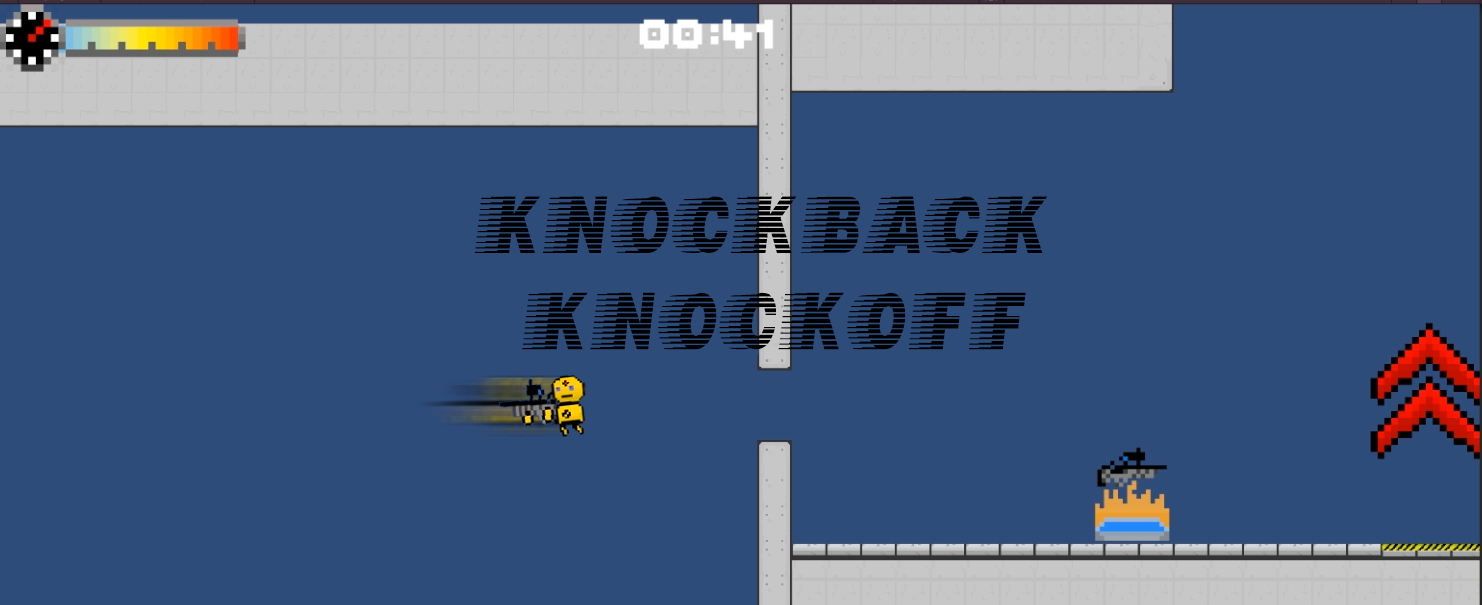
<style>
.page{position:relative;width:1482px;height:605px;background:#2e4c7a}
.page>*{position:absolute;margin:0}
.t1{font:80.2px "Speedway";color:#000000;scale:0.65 1}
</style>
<div class="page">
<p class="t1" style="left:474px;top:196px;width:574px;height:154px;text-align:center">Knockback <br>Knockoff</p>
</div>
